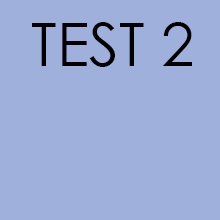
<style>
.page{position:relative;width:220px;height:220px;background:#a0b0dd}
.page>*{position:absolute;margin:0}
.t1{font:60px "CenturyGothic";color:#000000}
</style>
<div class="page">
<p class="t1" style="left:32px;top:22px;width:160px;height:45px">TEST 2</p>
</div>
